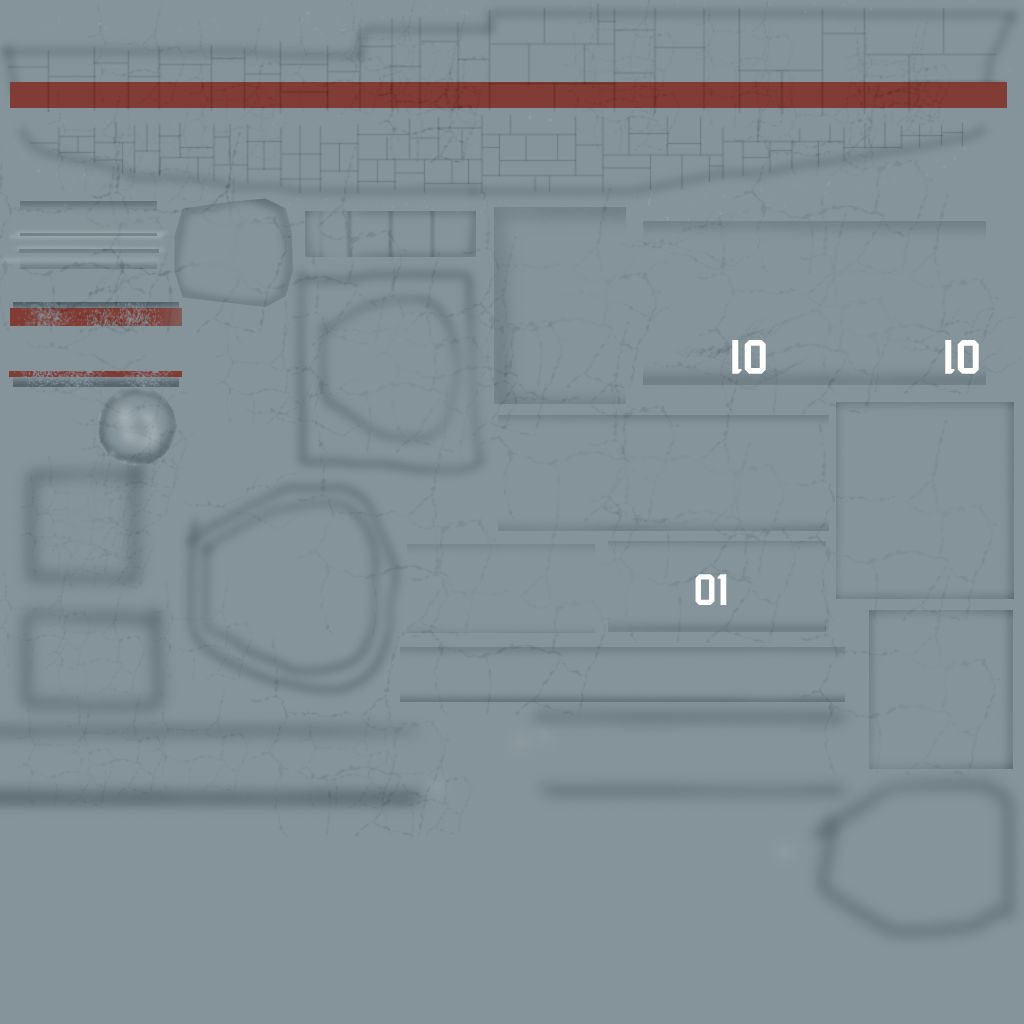
<style>
.page{position:relative;width:1024px;height:1024px;background:#85939a}
.page>*{position:absolute;margin:0}
.t1{font:52.8px "Bombardier";color:#ffffff}
.t2{font:48px "Bombardier";color:#ffffff}
</style>
<div class="page">
<p class="t1" style="left:732px;top:340px;width:34px;height:34px;rotate:180deg">01</p>
<p class="t1" style="left:945px;top:340px;width:34px;height:34px;rotate:180deg">01</p>
<p class="t2" style="left:695px;top:574px;width:32px;height:31px">01</p>
</div>
